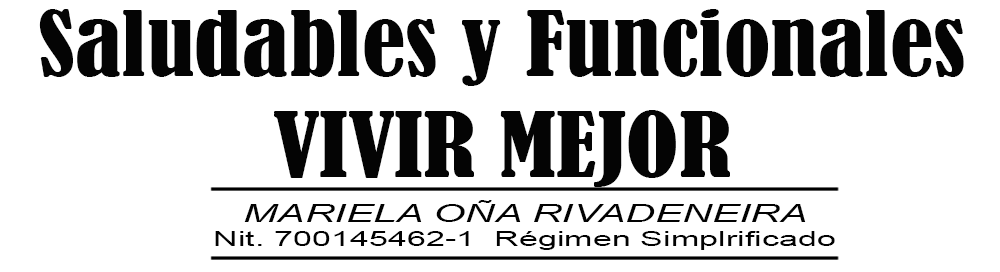
<style>
.page{position:relative;width:1000px;height:272px;background:#ffffff}
.page>*{position:absolute;margin:0}
.t1{font:84.5px "BernardMT-Condensed";color:#040404;scale:1.15 1}
.t2{font:20.6px "ArialMT";color:#020202;scale:1.66 1}
.t3{font:24.7px "Arial-ItalicMT";color:#020202;scale:1.66 1}
</style>
<div class="page">
<p class="t1" style="left:39px;top:9px;width:925px;height:178px;text-align:center">Saludables y Funcionales<br>VIVIR MEJOR</p>
<p class="t2" style="left:215px;top:200px;width:620px;height:50px;text-align:center"><span class="t3">MARIELA OÑA RIVADENEIRA<br></span>Nit. 700145462-1  Régimen Simplrificado</p>
</div>
